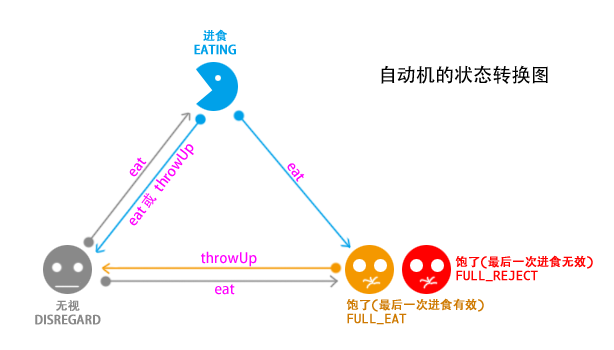
<style>
.page{position:relative;width:614px;height:350px;background:#ffffff}
.page>*{position:absolute;margin:0}
.t1{font:12px/14px "AdobeHeitiStd-Regular";color:#00a1e9;font-weight:bold}
.t2{font:19.1px "AdobeHeitiStd-Regular";color:#000000}
.t3{font:14px "AdobeHeitiStd-Regular";color:#ff00ff}
.t4{font:12px/14px "Monaco";color:#ff0000;font-weight:bold}
.t5{font:12px/14px "AdobeHeitiStd-Regular";color:#ff0000;font-weight:bold}
.t6{font:12px/14px "AdobeHeitiStd-Regular";color:#898989;font-weight:bold}
.t7{font:12px/14px "Monaco";color:#ce7900;font-weight:bold}
.t8{font:12px/14px "AdobeHeitiStd-Regular";color:#ce7900;font-weight:bold}
</style>
<div class="page">
<p class="t1" style="left:194px;top:29px;width:42px;height:26px;text-align:center">进食<br>EATING</p>
<p class="t2" style="left:381px;top:65px;width:167px;height:19px">自动机的状态转换图</p>
<p class="t3" style="left:129px;top:144px;width:65px;height:82px;rotate:-53deg">eat 或  throwUp</p>
<p class="t3" style="left:129px;top:157px;width:18px;height:20px;rotate:-52deg">eat</p>
<p class="t3" style="left:287px;top:163px;width:18px;height:19px;rotate:54deg">eat</p>
<p class="t3" style="left:201px;top:251px;width:56px;height:16px">throwUp</p>
<p class="t4" style="left:455px;top:255px;width:138px;height:27px"><span class="t5">饱了</span>(<span class="t5">最后一次进食无效</span>)<br>FULL_REJECT</p>
<p class="t3" style="left:215px;top:284px;width:20px;height:11px">eat</p>
<p class="t6" style="left:35px;top:300px;width:66px;height:25px;text-align:center">无视<br>DISREGARD</p>
<p class="t7" style="left:346px;top:298px;width:138px;height:27px"><span class="t8">饱了</span>(<span class="t8">最后一次进食有效</span>)<br>FULL_EAT</p>
</div>
